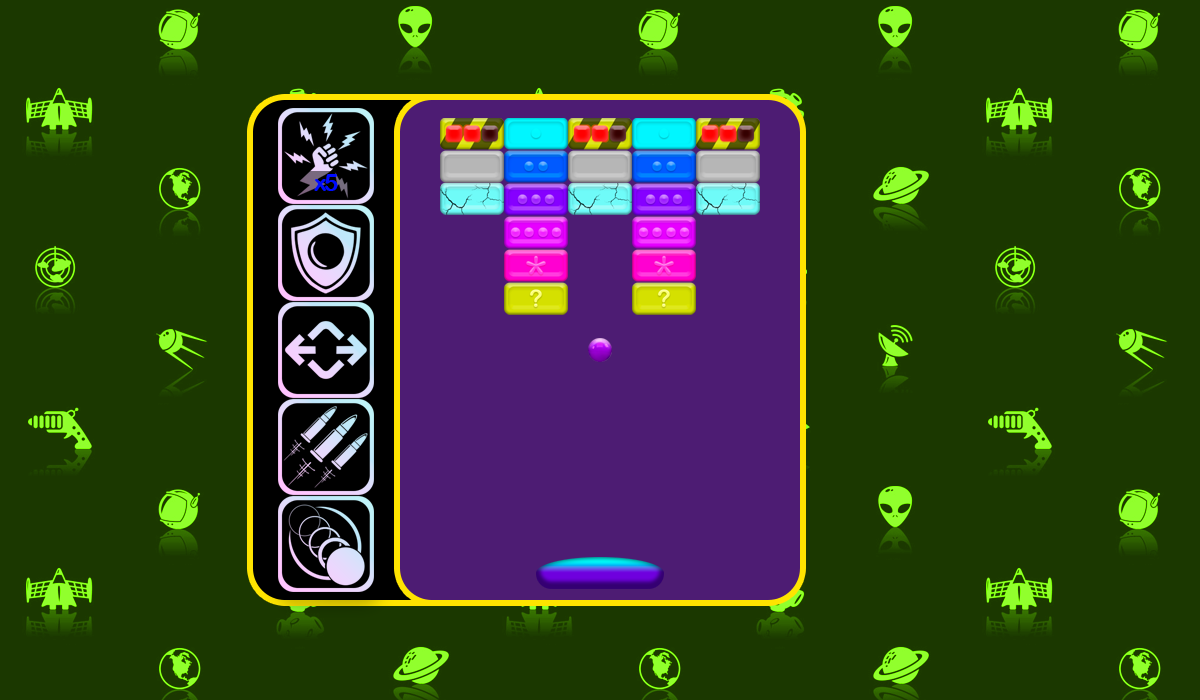
<style>
.page{position:relative;width:1200px;height:700px;background:#1b3800}
.page>*{position:absolute;margin:0}
.t1{font:24px "ArialRoundedMTBold";letter-spacing:-0.1em;color:#000cff}
</style>
<div class="page">
<p class="t1" style="left:314px;top:174px;width:24px;height:17px">x5</p>
</div>
